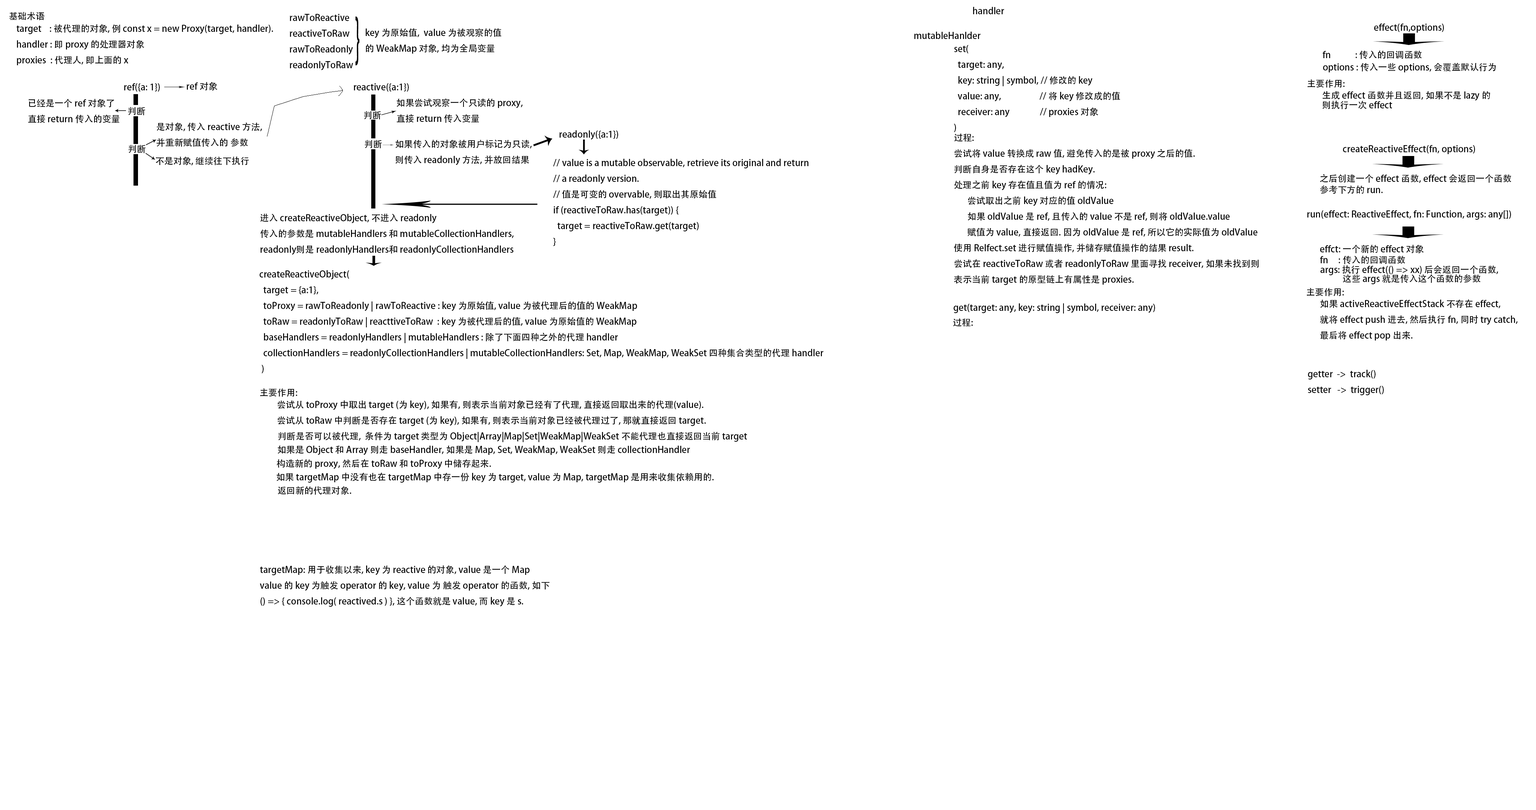
<style>
.page{position:relative;width:1536px;height:810px;background:#ffffff}
.page>*{position:absolute;margin:0}
.t1{font:9px "AdobeHeitiStd-Regular";color:#000000}
.t2{font:53.7px "AdobeHeitiStd-Regular";color:#000000;scale:0.28 1}
.t3{font:9px/9.8px "AdobeHeitiStd-Regular";color:#000000}
.t4{font:9px/11.2px "AdobeHeitiStd-Regular";color:#000000}
.t5{font:9px/9px "AdobeHeitiStd-Regular";color:#000000}
</style>
<div class="page">
<p class="t1" style="left:9px;top:12px;width:36px;height:8px">基础术语</p>
<p class="t1" style="left:290px;top:14px;width:63px;height:56px">rawToReactive<br>reactiveToRaw<br>rawToReadonly<br>readonlyToRaw</p>
<p class="t2" style="left:356px;top:16px;width:4px;height:50px">}</p>
<p class="t1" style="left:973px;top:7px;width:31px;height:7px">handler</p>
<p class="t1" style="left:16px;top:24px;width:257px;height:41px">target    : 被代理的对象, 例 const x = new Proxy(target, handler).<br>handler : 即 proxy 的处理器对象<br>proxies  : 代理人, 即上面的 x</p>
<p class="t1" style="left:366px;top:28px;width:135px;height:26px">key 为原始值,  value 为被观察的值<br>的 WeakMap 对象, 均为全局变量</p>
<p class="t1" style="left:1374px;top:23px;width:70px;height:10px">effect(fn,options)</p>
<p class="t1" style="left:914px;top:32px;width:67px;height:7px">mutableHanlder</p>
<p class="t1" style="left:954px;top:45px;width:166px;height:87px">set(<br>  target: any,    <br>  key: string | symbol, // 修改的 key<br>  value: any,                   // 将 key 修改成的值<br>  receiver: any               // proxies 对象 <br>)</p>
<p class="t1" style="left:1323px;top:51px;width:99px;height:8px">fn            : 传入的回调函数</p>
<p class="t1" style="left:1323px;top:63px;width:173px;height:9px">options : 传入一些 options, 会覆盖默认行为</p>
<p class="t1" style="left:124px;top:83px;width:36px;height:9px">ref({a: 1})</p>
<p class="t1" style="left:187px;top:82px;width:31px;height:9px">ref 对象</p>
<p class="t1" style="left:354px;top:83px;width:55px;height:9px">reactive({a:1})</p>
<p class="t1" style="left:1308px;top:79px;width:37px;height:9px">主要作用:</p>
<p class="t1" style="left:28px;top:99px;width:92px;height:24px">已经是一个 ref 对象了<br>直接 return 传入的变量</p>
<p class="t1" style="left:396px;top:98px;width:127px;height:25px">如果尝试观察一个只读的 proxy, <br>直接 return 传入变量</p>
<p class="t3" style="left:1322px;top:91px;width:168px;height:18px">生成 effect 函数并且返回, 如果不是 lazy 的<br>则执行一次 effect</p>
<p class="t1" style="left:128px;top:107px;width:17px;height:9px">判断</p>
<p class="t1" style="left:364px;top:111px;width:17px;height:9px">判断</p>
<p class="t1" style="left:156px;top:122px;width:106px;height:25px">是对象, 传入 reactive 方法,<br>并重新赋值传入的 参数</p>
<p class="t1" style="left:560px;top:130px;width:58px;height:10px">readonly({a:1})</p>
<p class="t1" style="left:954px;top:134px;width:305px;height:151px">过程:<br>尝试将 value 转换成 raw 值, 避免传入的是被 proxy 之后的值.<br>判断自身是否存在这个 key hadKey.<br>处理之前 key 存在值且值为 ref 的情况: <br> 尝试取出之前 key 对应的值 oldValue<br> 如果 oldValue 是 ref, 且传入的 value 不是 ref, 则将 oldValue.value<br> 赋值为 value, 直接返回. 因为 oldValue 是 ref, 所以它的实际值为 oldValue<br>使用 Relfect.set 进行赋值操作, 并储存赋值操作的结果 result.<br>尝试在 reactiveToRaw 或者 readonlyToRaw 里面寻找 receiver, 如果未找到则<br>表示当前 target 的原型链上有属性是 proxies.</p>
<p class="t1" style="left:129px;top:145px;width:17px;height:8px">判断</p>
<p class="t1" style="left:365px;top:140px;width:17px;height:8px">判断</p>
<p class="t1" style="left:395px;top:140px;width:137px;height:25px">如果传入的对象被用户标记为只读, <br>则传入 readonly 方法, 并放回结果</p>
<p class="t1" style="left:1343px;top:145px;width:132px;height:9px">createReactiveEffect(fn, options)</p>
<p class="t1" style="left:156px;top:156px;width:93px;height:9px">不是对象, 继续往下执行</p>
<p class="t1" style="left:553px;top:159px;width:255px;height:87px">// value is a mutable observable, retrieve its original and return<br>  // a readonly version.<br>  // 值是可变的 overvable, 则取出其原始值<br>  if (reactiveToRaw.has(target)) {<br>    target = reactiveToRaw.get(target)<br>  }</p>
<p class="t4" style="left:1320px;top:174px;width:191px;height:20px">之后创建一个 effect 函数, effect 会返回一个函数<br>   参考下方的 run.</p>
<p class="t1" style="left:260px;top:213px;width:254px;height:42px">进入 createReactiveObject, 不进入 readonly <br>传入的参数是 mutableHandlers 和 mutableCollectionHandlers,<br>readonly则是 readonlyHandlers和 readonlyCollectionHandlers</p>
<p class="t1" style="left:1307px;top:210px;width:204px;height:10px">run(effect: ReactiveEffect, fn: Function, args: any[])</p>
<p class="t1" style="left:1320px;top:244px;width:104px;height:10px">effct: 一个新的 effect 对象</p>
<p class="t1" style="left:1320px;top:256px;width:85px;height:8px">fn     : 传入的回调函数</p>
<p class="t1" style="left:260px;top:270px;width:564px;height:104px">createReactiveObject(<br>  target = {a:1},<br>  toProxy = rawToReadonly | rawToReactive : key 为原始值, value 为被代理后的值的 WeakMap<br>  toRaw = readonlyToRaw | reacttiveToRaw  : key 为被代理后的值, value 为原始值的 WeakMap <br>  baseHandlers = readonlyHandlers | mutableHandlers : 除了下面四种之外的代理 handler  <br>  collectionHandlers = readonlyCollectionHandlers | mutableCollectionHandlers: Set, Map, WeakMap, WeakSet 四种集合类型的代理 handler<br> )</p>
<p class="t5" style="left:1320px;top:265px;width:178px;height:19px">args: 执行 effect(() =&gt; xx) 后会返回一个函数,<br>           这些 args 就是传入这个函数的参数</p>
<p class="t1" style="left:1307px;top:288px;width:37px;height:8px">主要作用:</p>
<p class="t1" style="left:954px;top:303px;width:201px;height:11px">get(target: any, key: string | symbol, receiver: any)</p>
<p class="t1" style="left:1320px;top:299px;width:198px;height:41px">如果 activeReactiveEffectStack 不存在 effect, <br>就将 effect push 进去, 然后执行 fn, 同时 try catch,<br>最后将 effect pop 出来.</p>
<p class="t1" style="left:953px;top:318px;width:20px;height:9px">过程:</p>
<p class="t1" style="left:1308px;top:370px;width:76px;height:25px">getter  -&gt;  track()<br>setter   -&gt;  trigger()</p>
<p class="t1" style="left:260px;top:388px;width:37px;height:9px">主要作用:</p>
<p class="t1" style="left:278px;top:400px;width:428px;height:26px">尝试从 toProxy 中取出 target (为 key), 如果有, 则表示当前对象已经有了代理, 直接返回取出来的代理(value).<br>尝试从 toRaw 中判断是否存在 target (为 key), 如果有, 则表示当前对象已经被代理过了, 那就直接返回 target.</p>
<p class="t1" style="left:278px;top:432px;width:469px;height:10px">判断是否可以被代理,  条件为 target 类型为 Object|Array|Map|Set|WeakMap|WeakSet 不能代理也直接返回当前 target</p>
<p class="t1" style="left:278px;top:445px;width:412px;height:10px">如果是 Object 和 Array 则走 baseHandler, 如果是 Map, Set, WeakMap, WeakSet 则走 collectionHandler</p>
<p class="t1" style="left:277px;top:459px;width:214px;height:10px">构造新的 proxy, 然后在 toRaw 和 toProxy 中储存起来.</p>
<p class="t1" style="left:276px;top:472px;width:438px;height:11px">如果 targetMap 中没有也在 targetMap 中存一份 key 为 target, value 为 Map, targetMap 是用来收集依赖用的.</p>
<p class="t1" style="left:278px;top:486px;width:73px;height:9px">返回新的代理对象.</p>
<p class="t1" style="left:260px;top:565px;width:289px;height:42px">targetMap: 用于收集以来, key 为 reactive 的对象, value 是一个 Map <br>value 的 key 为触发 operator 的 key, value 为 触发 operator 的函数, 如下<br>() =&gt; { console.log( reactived.s ) }, 这个函数就是 value, 而 key 是 s.</p>
</div>
